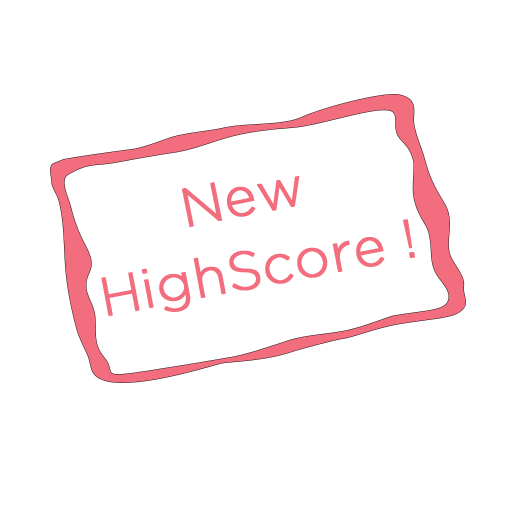
<style>
.page{position:relative;width:512px;height:512px;background:#ffffff}
.page>*{position:absolute;margin:0}
.t1{font:93px "GothamLight";color:#f26d7d;font-weight:bold}
</style>
<div class="page">
<p class="t1" style="left:182px;top:176px;width:118px;height:51px;rotate:-11deg">New</p>
<p class="t1" style="left:101px;top:219px;width:314px;height:97px;rotate:-11deg">HighScore !</p>
</div>
